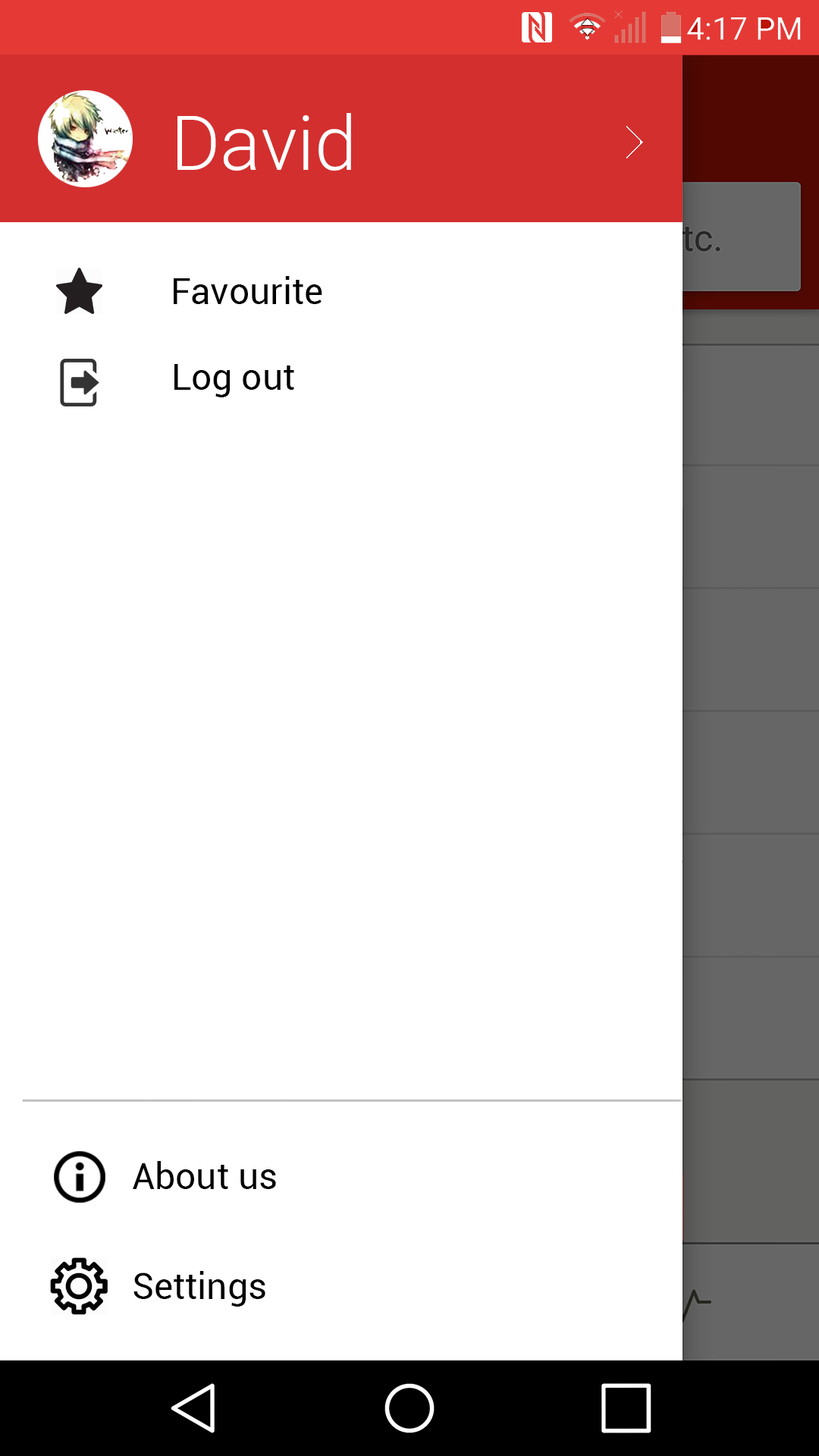
<style>
.page{position:relative;width:819px;height:1456px;background:#ffffff}
.page>*{position:absolute;margin:0}
.t1{font:75.8px "Roboto-Light";color:#ffffff}
.t2{font:36.4px "Roboto-Regular";color:#000000}
</style>
<div class="page">
<p class="t1" style="left:177px;top:113px;width:174px;height:58px">David</p>
<p class="t2" style="left:174px;top:276px;width:148px;height:28px">Favourite</p>
<p class="t2" style="left:174px;top:364px;width:120px;height:33px">Log out</p>
<p class="t2" style="left:133px;top:1161px;width:143px;height:28px">About us</p>
<p class="t2" style="left:133px;top:1271px;width:132px;height:36px">Settings</p>
</div>
